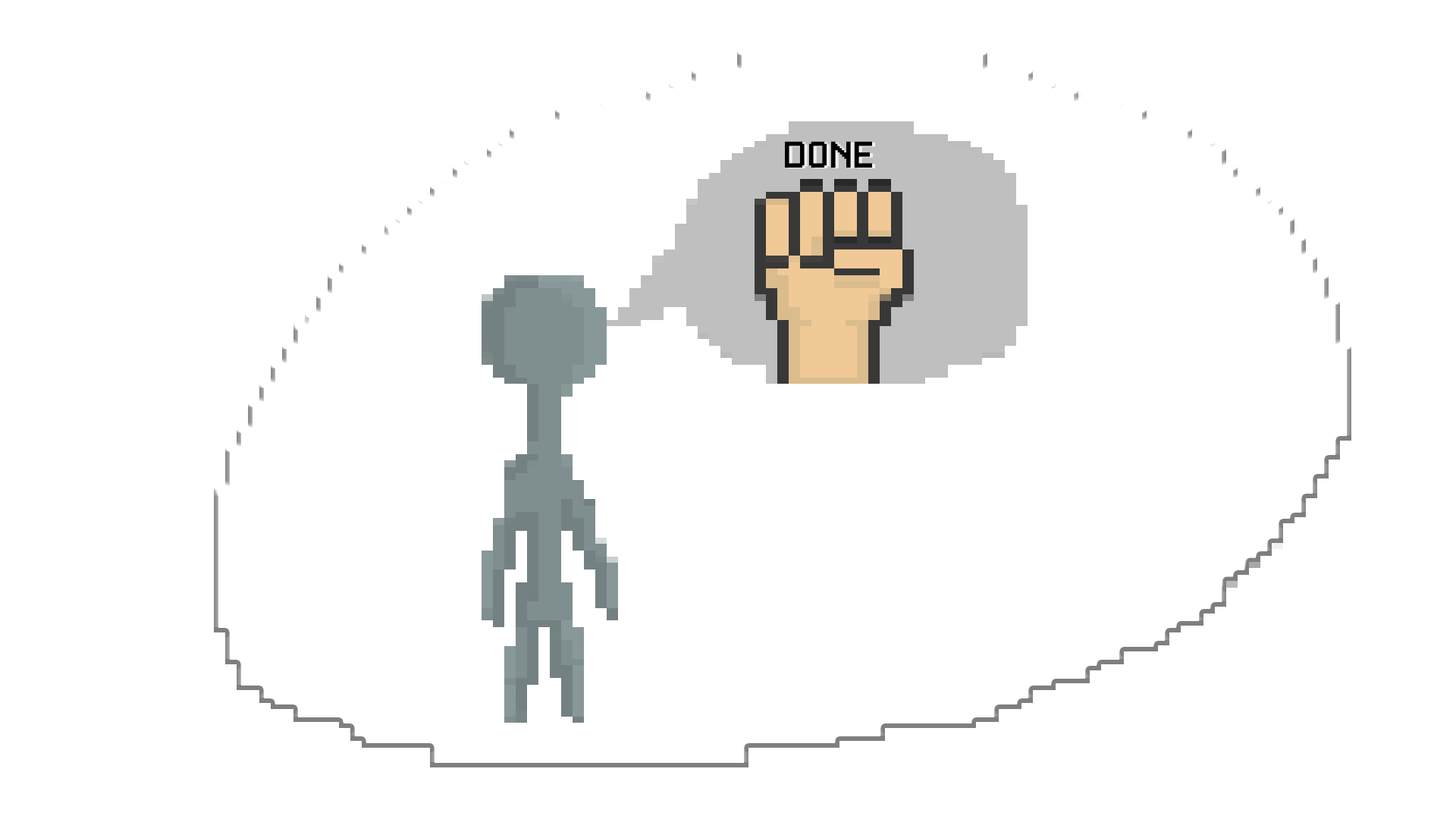
<style>
.page{position:relative;width:1456px;height:819px;background:#ffffff}
.page>*{position:absolute;margin:0}
.t1{font:34.8px "PixelGameFont";color:#000000;text-transform:uppercase}
</style>
<div class="page">
<p class="t1" style="left:785px;top:141px;width:87px;height:27px">DONE</p>
</div>
